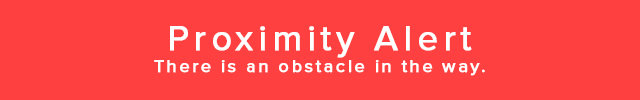
<style>
.page{position:relative;width:640px;height:100px;background:#ff4040}
.page>*{position:absolute;margin:0}
.t1{font:36px "ProximaNova-Regular";letter-spacing:0.125em;color:#ffffff;font-weight:bold}
.t2{font:18px "ProximaNova-Regular";letter-spacing:0.125em;color:#ffffff;font-weight:bold}
</style>
<div class="page">
<p class="t1" style="left:170px;top:26px;width:302px;height:32px">Proximity Alert</p>
<p class="t2" style="left:154px;top:60px;width:331px;height:16px">There is an obstacle in the way.</p>
</div>
